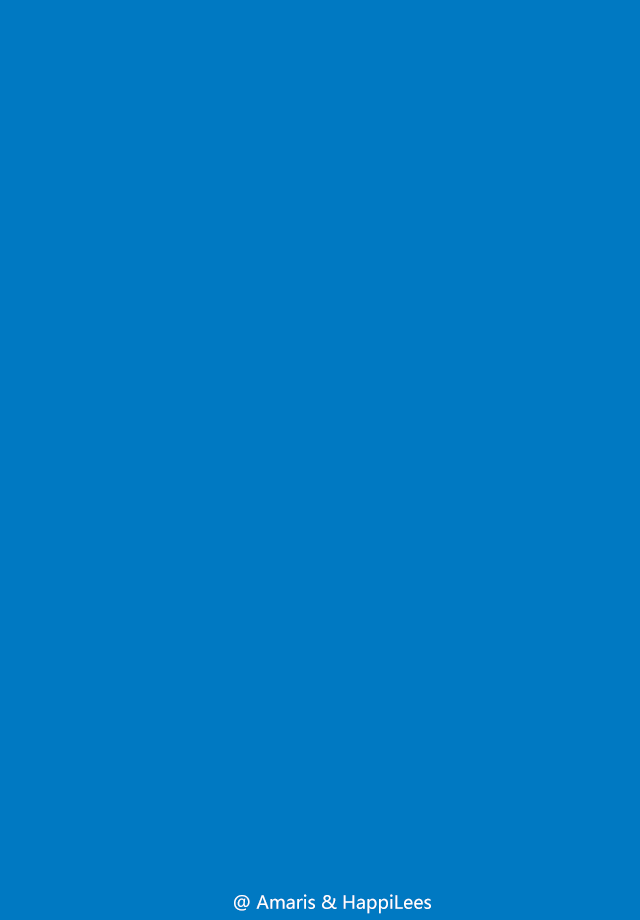
<style>
.page{position:relative;width:640px;height:920px;background:#0079c2}
.page>*{position:absolute;margin:0}
.t1{font:18px "MicrosoftYaHei";color:#ffffff}
</style>
<div class="page">
<p class="t1" style="left:234px;top:894px;width:197px;height:20px">@ Amaris &amp; HappiLees</p>
</div>
